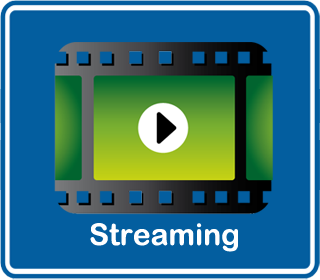
<style>
.page{position:relative;width:320px;height:280px;background:#035e9f}
.page>*{position:absolute;margin:0}
.t1{font:30px "ArialRoundedMTBold";color:#ffffff}
</style>
<div class="page">
<p class="t1" style="left:90px;top:223px;width:148px;height:29px">Streaming</p>
</div>
